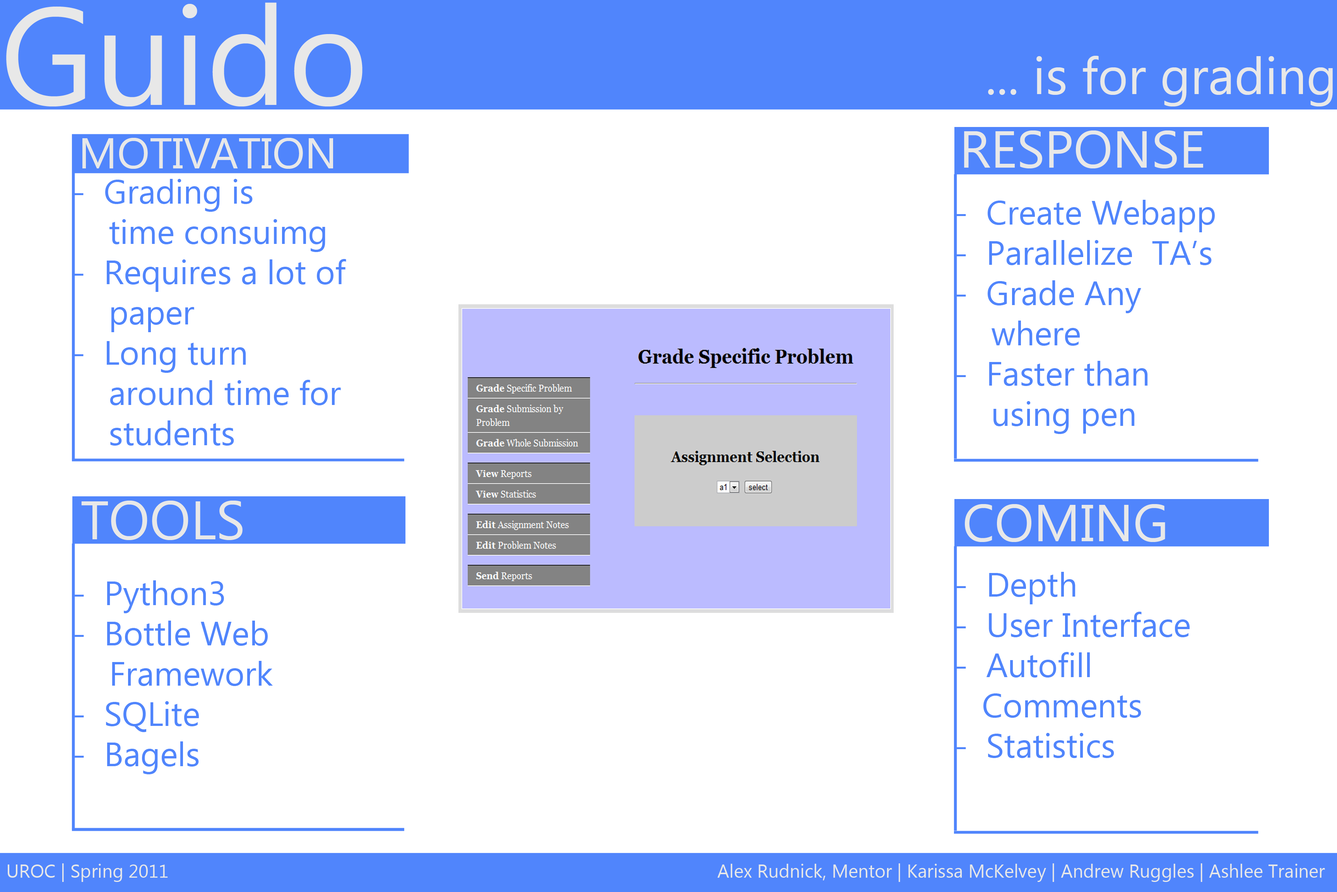
<style>
.page{position:relative;width:1337px;height:892px;background:#ffffff}
.page>*{position:absolute;margin:0}
.t1{font:138.2px "KhmerUI";color:#e8e8e8}
.t2{font:51.6px "KhmerUI";color:#e8e8e8}
.t3{font:43.1px "KhmerUI";color:#e8e8e8}
.t4{font:52px "KhmerUI";color:#e8e8e8}
.t5{font:33.5px "KhmerUI";color:#5085fc}
.t6{font:54.3px "KhmerUI";color:#e8e8e8}
.t7{font:18.6px "KhmerUI";color:#e8e8e8}
</style>
<div class="page">
<p class="t1" style="left:6px;top:2px;width:357px;height:104px">Guido</p>
<p class="t2" style="left:988px;top:56px;width:345px;height:50px">... is for grading</p>
<p class="t3" style="left:82px;top:138px;width:251px;height:31px">MOTIVATION</p>
<p class="t4" style="left:964px;top:130px;width:240px;height:38px">RESPONSE</p>
<p class="t5" style="left:74px;top:179px;width:272px;height:266px">-  Grading is      <br>    time consuimg<br>-  Requires a lot of <br>    paper<br>-  Long turn<br>    around time for <br>    students</p>
<p class="t5" style="left:957px;top:200px;width:258px;height:234px">-  Create Webapp<br>-  Parallelize  TA’s<br>-  Grade Any <br>    where<br>-  Faster than <br>    using pen</p>
<p class="t6" style="left:81px;top:500px;width:162px;height:40px">TOOLS</p>
<p class="t4" style="left:965px;top:504px;width:201px;height:38px">COMING</p>
<p class="t5" style="left:75px;top:580px;width:198px;height:194px">-  Python3<br>-  Bottle Web <br>    Framework<br>-  SQLite<br>-  Bagels</p>
<p class="t5" style="left:957px;top:572px;width:233px;height:186px">-  Depth<br>-  User Interface<br>-  Autofill <br>   Comments<br>-  Statistics</p>
<p class="t7" style="left:8px;top:863px;width:160px;height:19px">UROC | Spring 2011</p>
<p class="t7" style="left:717px;top:863px;width:608px;height:19px">Alex Rudnick, Mentor | Karissa McKelvey | Andrew Ruggles | Ashlee Trainer</p>
</div>
